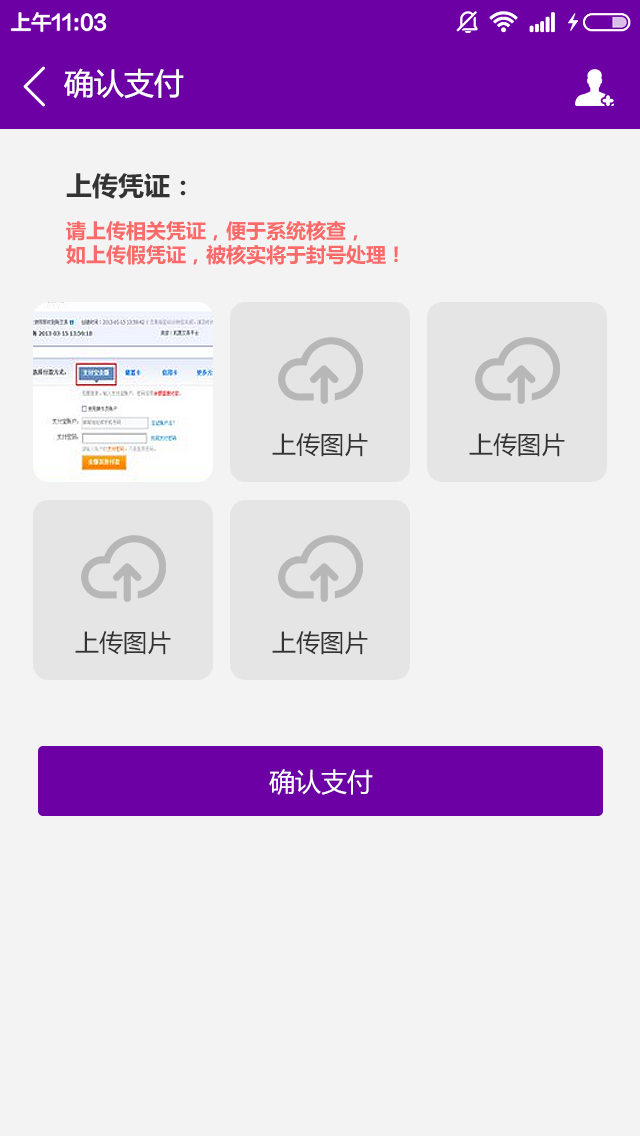
<style>
.page{position:relative;width:640px;height:1136px;background:#f3f3f3}
.page>*{position:absolute;margin:0}
.t1{font:30px "MicrosoftYaHei";color:#ffffff}
.t2{font:20px/24px "Î¢ÈíÑÅºÚ83¹«ÉçÌØ±ð°æ\BBS.83GS.CN-B";color:#f96a69}
.t3{font:26px/24px "Î¢ÈíÑÅºÚ83¹«ÉçÌØ±ð°æ\BBS.83GS.CN-B";color:#333333}
.t4{font:24px "MicrosoftYaHei";color:#333333}
.t5{font:26px "MicrosoftYaHei";color:#ffffff}
</style>
<div class="page">
<p class="t1" style="left:64px;top:68px;width:120px;height:31px">确认支付</p>
<p class="t2" style="left:66px;top:173px;width:332px;height:92px"><span class="t3">上传凭证：<br></span><br>请上传相关凭证，便于系统核查，<br>如上传假凭证，被核实将于封号处理！</p>
<p class="t4" style="left:272px;top:433px;width:96px;height:24px">上传图片</p>
<p class="t4" style="left:469px;top:433px;width:96px;height:24px">上传图片</p>
<p class="t4" style="left:75px;top:631px;width:96px;height:24px">上传图片</p>
<p class="t4" style="left:272px;top:631px;width:96px;height:24px">上传图片</p>
<p class="t5" style="left:269px;top:769px;width:104px;height:26px">确认支付</p>
</div>
